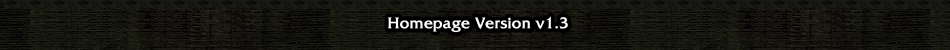
<style>
.page{position:relative;width:950px;height:50px}
.page>*{position:absolute;margin:0}
.t1{font:15px "2002L";color:#ffffff;font-weight:bold}
</style>
<div class="page">
<p class="t1" style="left:388px;top:16px;width:180px;height:17px">Homepage Version v1.3</p>
</div>
